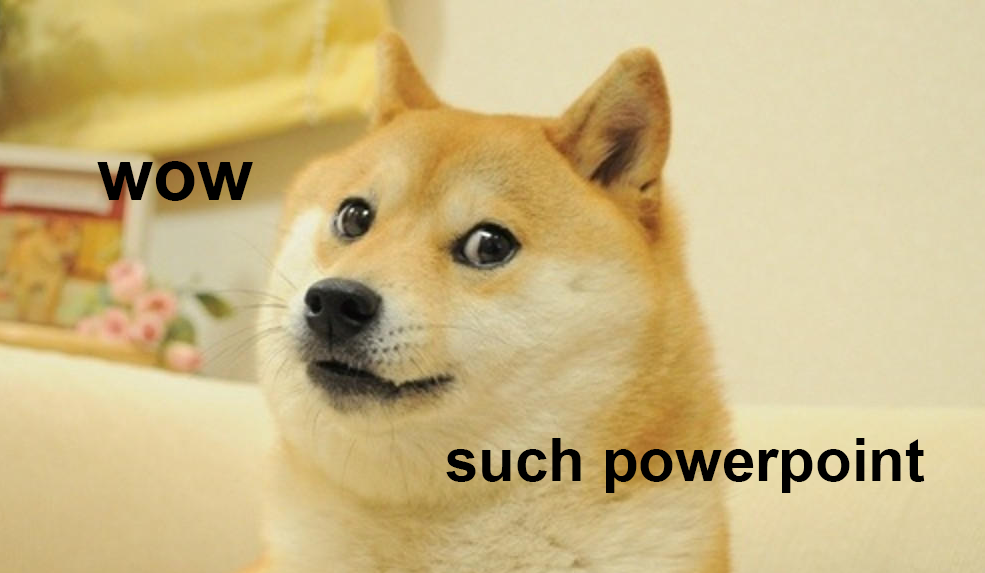
<style>
.page{position:relative;width:985px;height:573px}
.page>*{position:absolute;margin:0}
.t1{font:72px "Arial-BoldMT";color:#000000}
.t2{font:60px "Arial-BoldMT";color:#000000}
</style>
<div class="page">
<p class="t1" style="left:97px;top:161px;width:156px;height:40px">wow</p>
<p class="t2" style="left:446px;top:438px;width:479px;height:55px">such powerpoint</p>
</div>
